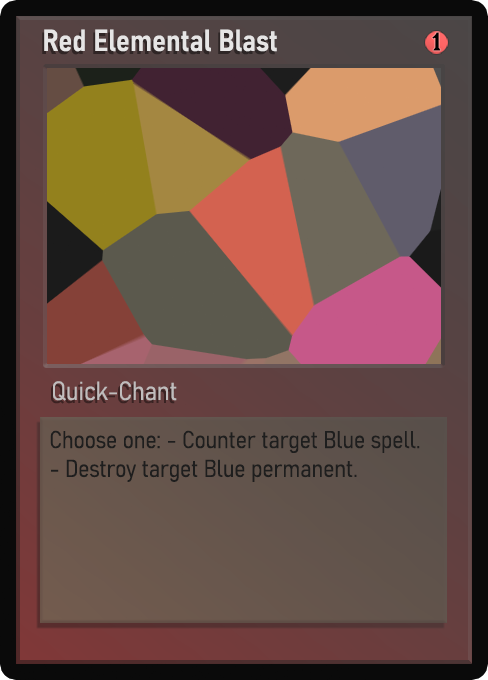
<style>
.page{position:relative;width:488px;height:680px}
.page>*{position:absolute;margin:0}
.t1{font:30px "Bahnschrift-SemiBoldSemiCondensed";color:#f2f2f2;font-weight:bold}
.t2{font:25px "WTRRoycroft";color:#000000;font-weight:bold;scale:1.09 1}
.t3{font:26px "Bahnschrift-LightSemiCondensed";color:#c8c8c8;font-weight:bold}
.t4{font:24px "Bahnschrift-LightSemiCondensed";color:#1e1e1e;font-weight:bold}
</style>
<div class="page">
<p class="t1" style="left:44px;top:29px;width:233px;height:23px;opacity:0.9">Red Elemental Blast</p>
<p class="t2" style="left:432px;top:32px;width:9px;height:19px">1</p>
<p class="t3" style="left:53px;top:381px;width:124px;height:20px;opacity:0.9">Quick-Chant</p>
<p class="t4" style="left:50px;top:430px;width:370px;height:52px">Choose one: - Counter target Blue spell. - Destroy target Blue permanent.</p>
</div>
